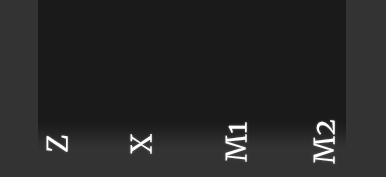
<style>
.page{position:relative;width:386px;height:177px;background:#1a1a1a}
.page>*{position:absolute;margin:0}
.t1{font:28.3px "Merriweather-Regular";color:#ffffff}
</style>
<div class="page">
<p class="t1" style="left:225px;top:122px;width:22px;height:40px;rotate:-90deg">M1</p>
<p class="t1" style="left:313px;top:120px;width:22px;height:44px;rotate:-90deg">M2</p>
<p class="t1" style="left:46px;top:135px;width:22px;height:17px;rotate:-90deg">Z</p>
<p class="t1" style="left:130px;top:134px;width:22px;height:20px;rotate:-90deg">X</p>
</div>
